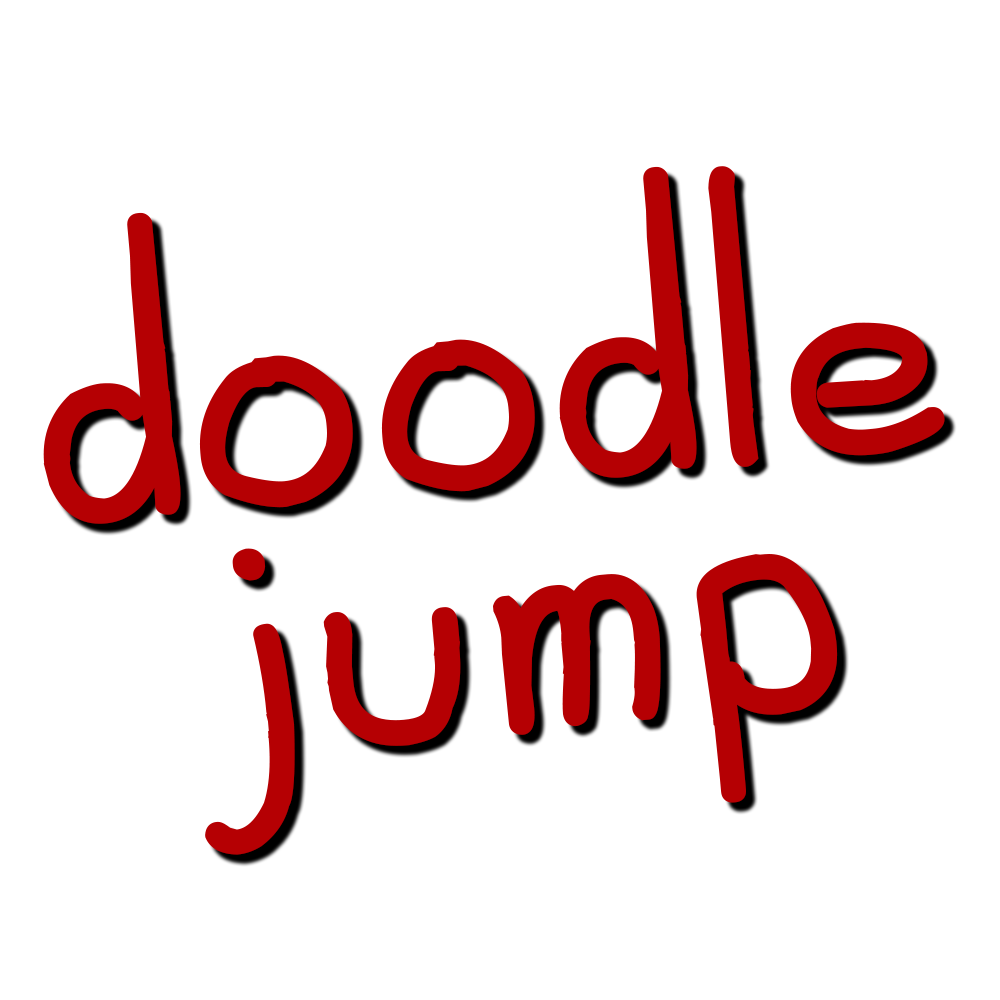
<style>
.page{position:relative;width:1000px;height:1000px;background:#ffffff}
.page>*{position:absolute;margin:0}
.t1{font:400px "Al-seana";color:#b50003;font-weight:bold}
</style>
<div class="page">
<p class="t1" style="left:43px;top:166px;width:902px;height:358px;rotate:-5deg">doodle</p>
<p class="t1" style="left:205px;top:548px;width:633px;height:307px;rotate:-5deg">jump</p>
</div>
